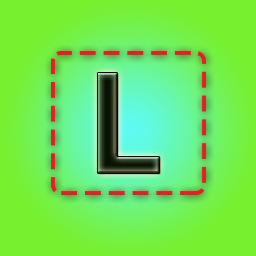
<style>
.page{position:relative;width:256px;height:256px}
.page>*{position:absolute;margin:0}
.t1{font:156.4px "Consolas-Bold"}
</style>
<div class="page">
<p class="t1" style="left:97px;top:73px;width:63px;height:100px">L</p>
</div>
